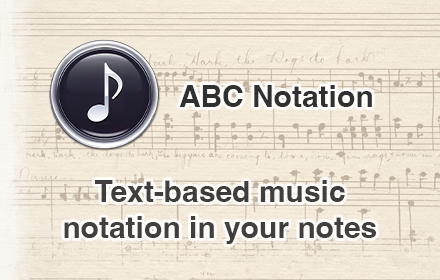
<style>
.page{position:relative;width:440px;height:280px}
.page>*{position:absolute;margin:0}
.t1{font:30px "Helvetica-Bold";color:#303030}
</style>
<div class="page">
<p class="t1" style="left:179px;top:85px;width:193px;height:22px">ABC Notation</p>
<p class="t1" style="left:64px;top:180px;width:312px;height:64px;text-align:center;opacity:0.95">Text-based music<br>notation in your notes</p>
</div>
